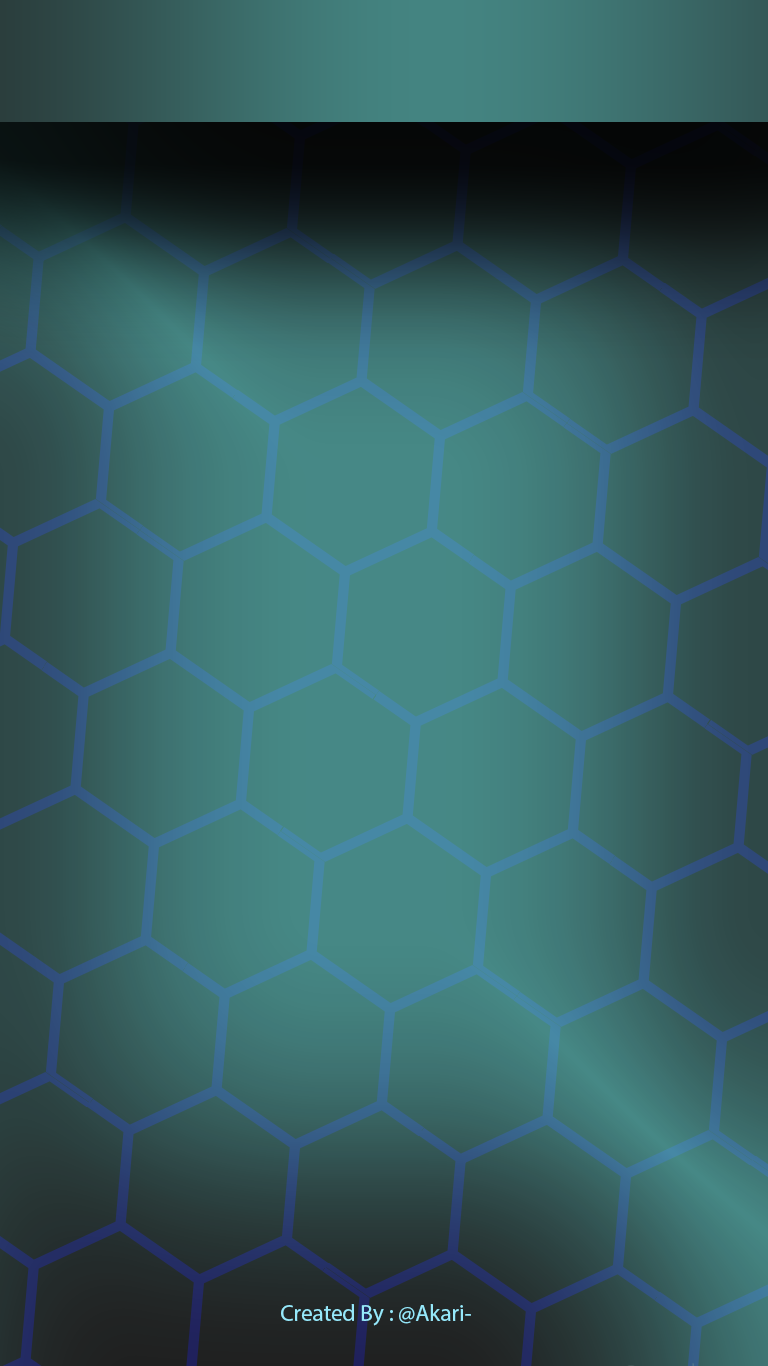
<style>
.page{position:relative;width:768px;height:1366px}
.page>*{position:absolute;margin:0}
.t1{font:23px "MyriadPro-Regular";color:#96e8fa}
</style>
<div class="page">
<p class="t1" style="left:281px;top:1304px;width:190px;height:22px">Created By : @Akari-</p>
</div>
